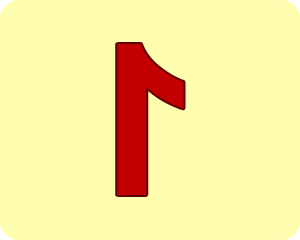
<style>
.page{position:relative;width:300px;height:240px;background:#fffdaf}
.page>*{position:absolute;margin:0}
.t1{font:210px "Arial-BoldMT";color:#c20000}
</style>
<div class="page">
<p class="t1" style="left:117px;top:44px;width:67px;height:151px;rotate:180deg">1</p>
</div>
